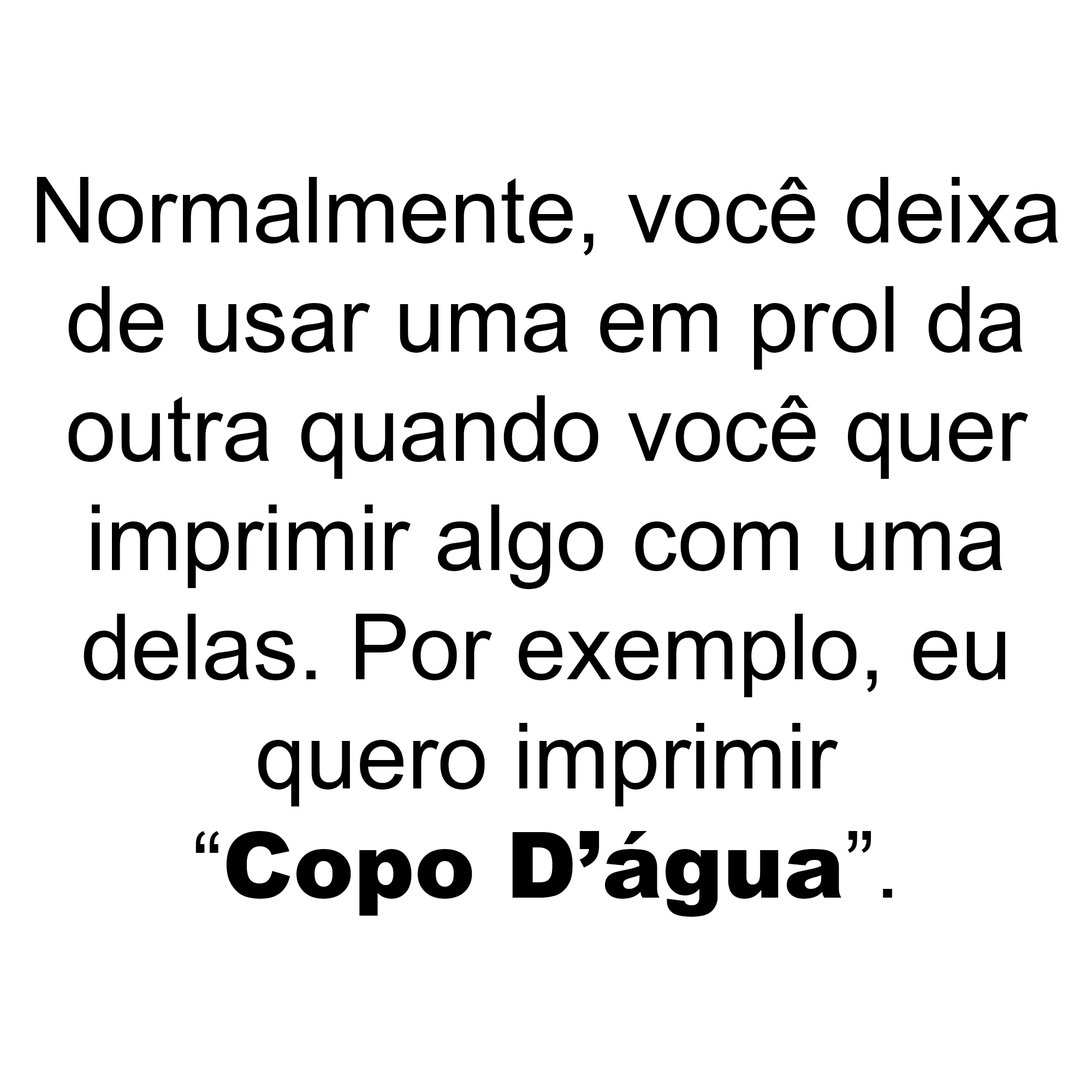
<style>
.page{position:relative;width:1092px;height:1092px;background:#ffffff}
.page>*{position:absolute;margin:0}
.t1{font:91px "ArialMT";color:#000000}
.t2{font:91px "Arial-Black";color:#000000}
</style>
<div class="page">
<p class="t1" style="left:37px;top:177px;width:1021px;height:740px;text-align:center">Normalmente, você deixa<br>de usar uma em prol da<br>outra quando você quer<br>imprimir algo com uma<br>delas. Por exemplo, eu<br>quero imprimir<br>“<span class="t2">Copo D’água</span>”.</p>
</div>
